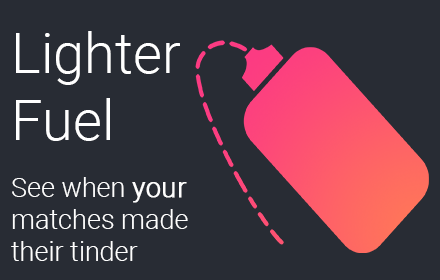
<style>
.page{position:relative;width:440px;height:280px;background:#282c34}
.page>*{position:absolute;margin:0}
.t1{font:56px "Roboto-Light";color:#ffffff}
.t2{font:27px "Roboto-Light";color:#fefefe}
.t3{font:27px "Roboto-Light";color:#fefefe;font-weight:bold}
</style>
<div class="page">
<p class="t1" style="left:16px;top:31px;width:164px;height:110px">Lighter Fuel</p>
<p class="t2" style="left:11px;top:177px;width:177px;height:84px">See when <span class="t3">your </span>matches made their tinder</p>
</div>
